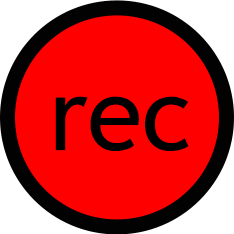
<style>
.page{position:relative;width:234px;height:234px;background:#ff0000}
.page>*{position:absolute;margin:0}
.t1{font:100px "TrebuchetMS";color:#000000}
</style>
<div class="page">
<p class="t1" style="left:55px;top:96px;width:134px;height:55px">rec</p>
</div>
